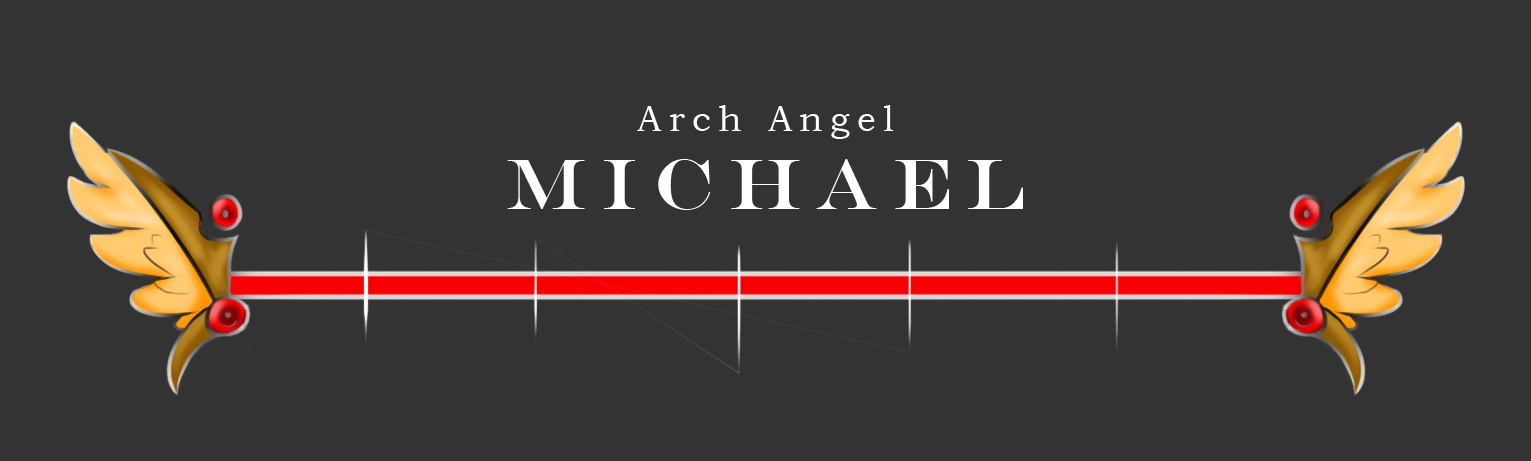
<style>
.page{position:relative;width:1531px;height:461px;background:#333333}
.page>*{position:absolute;margin:0}
.t1{font:36px "BookmanOldStyle";letter-spacing:0.2em;color:#ffffff}
.t2{font:72px "EngraversMT";letter-spacing:0.2em;color:#ffffff}
</style>
<div class="page">
<p class="t1" style="left:637px;top:105px;width:257px;height:34px">Arch Angel</p>
<p class="t2" style="left:507px;top:159px;width:516px;height:51px">MICHAEL</p>
</div>
